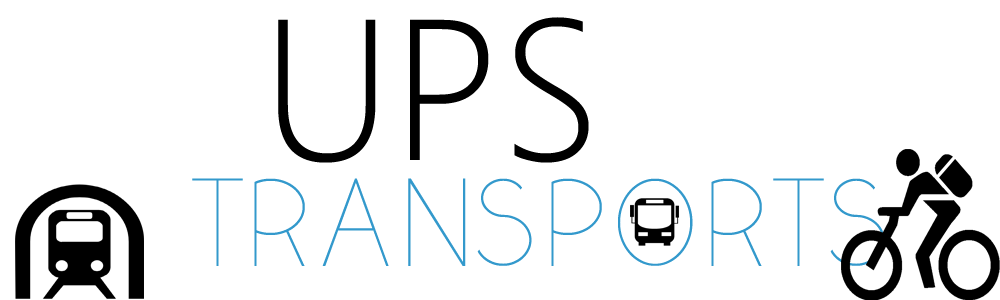
<style>
.page{position:relative;width:1000px;height:300px;background:#ffffff}
.page>*{position:absolute;margin:0}
.t1{font:200px "SegoeUI-Light";color:#000000}
.t2{font:125px "yellowpeasdemo";color:#3399cc}
</style>
<div class="page">
<p class="t1" style="left:278px;top:17px;width:311px;height:146px">UPS</p>
<p class="t2" style="left:192px;top:178px;width:693px;height:88px">TRANSPORTS</p>
</div>
